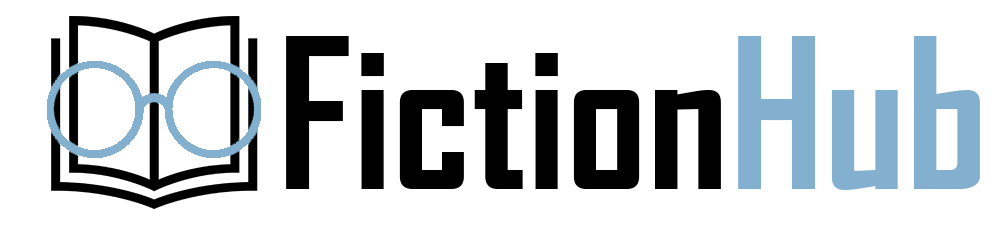
<style>
.page{position:relative;width:1000px;height:229px;background:#ffffff}
.page>*{position:absolute;margin:0}
.t1{font:200px "AgencyFB-Bold";color:#000000}
.t2{font:200px "AgencyFB-Bold";color:#83b0ce}
</style>
<div class="page">
<p class="t1" style="left:286px;top:36px;width:694px;height:154px">Fiction<span class="t2">Hub</span></p>
</div>
